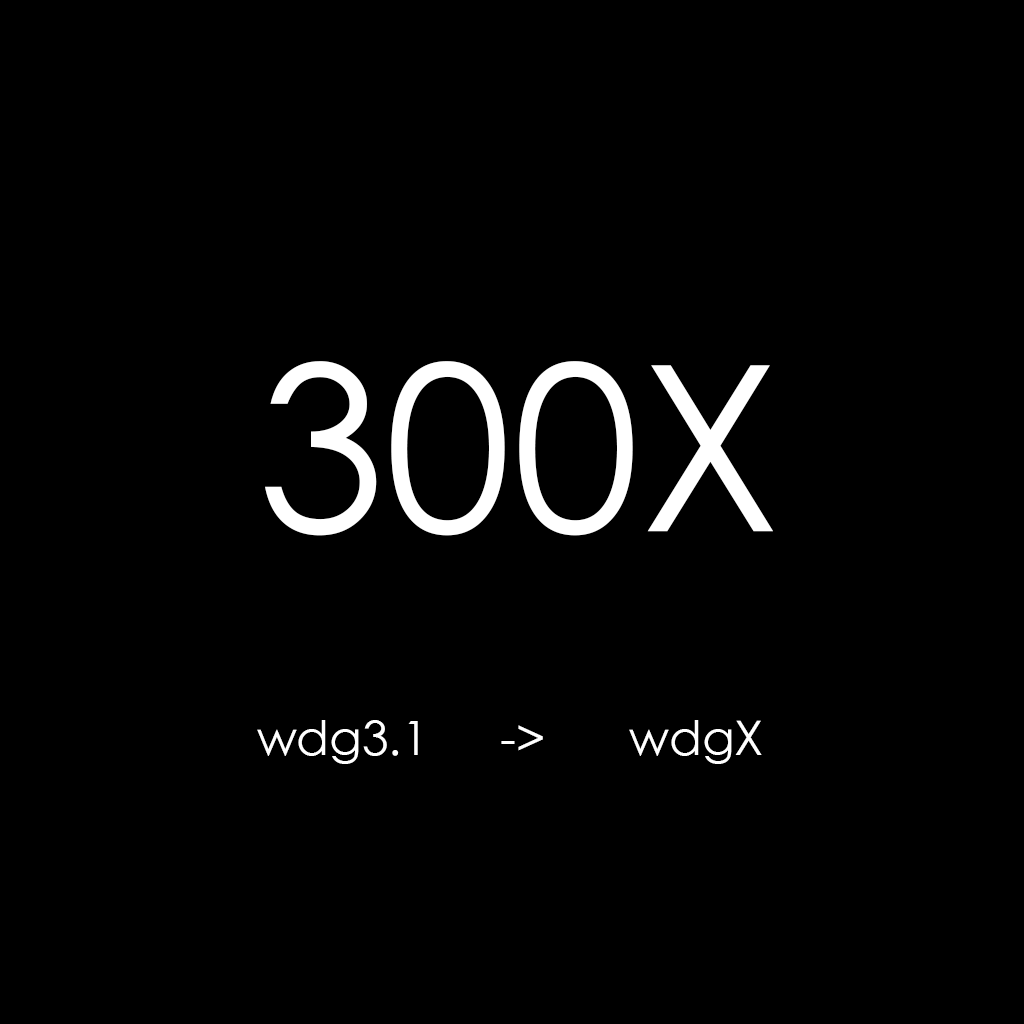
<style>
.page{position:relative;width:1024px;height:1024px;background:#000000}
.page>*{position:absolute;margin:0}
.t1{font:230.9px "STHeiti";color:#ffffff}
.t2{font:48px "STHeiti";color:#ffffff}
</style>
<div class="page">
<p class="t1" style="left:265px;top:361px;width:508px;height:175px">300X</p>
<p class="t2" style="left:257px;top:720px;width:505px;height:44px">wdg3.1      -&gt;       wdgX</p>
</div>
